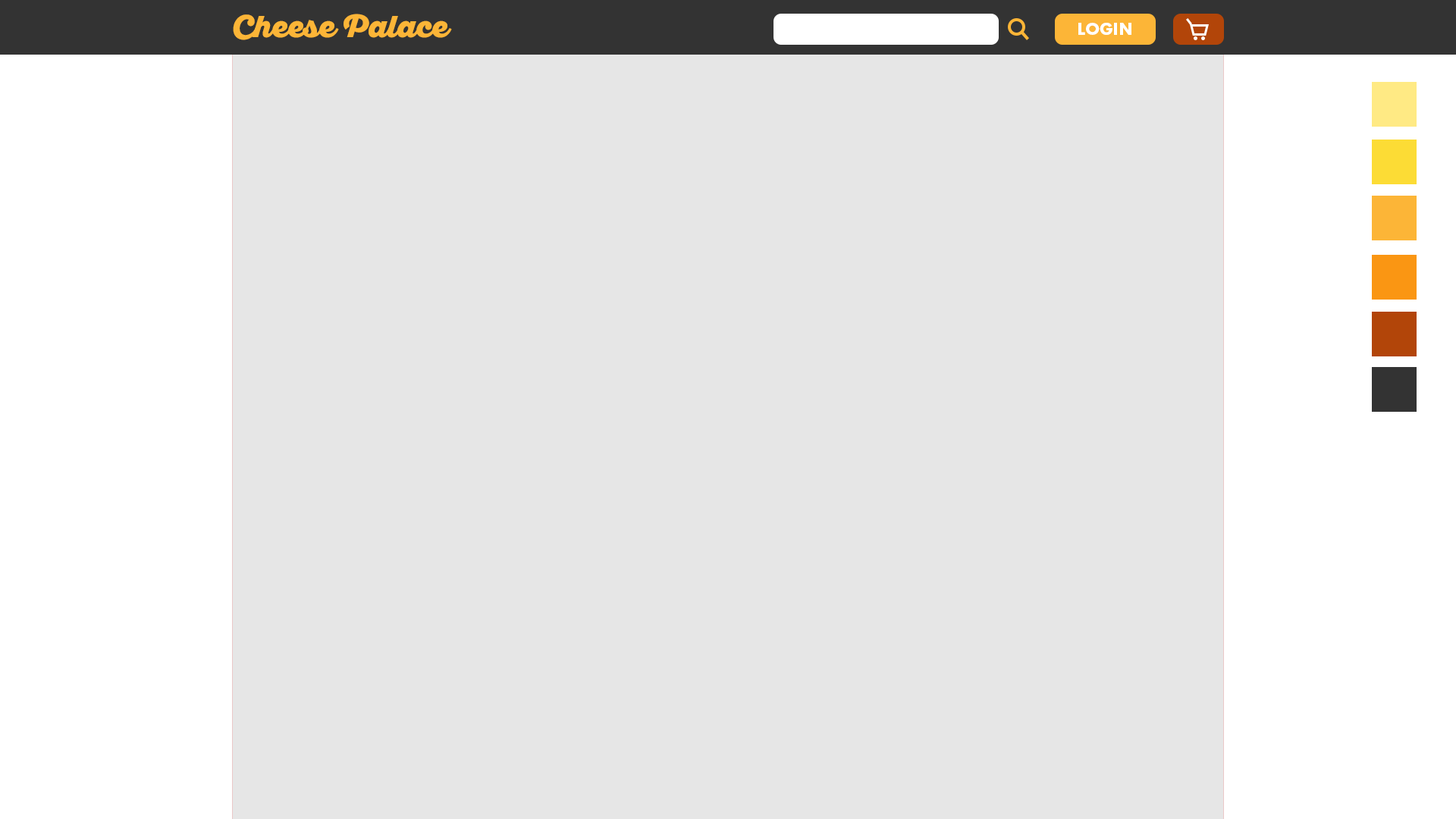
<style>
.page{position:relative;width:1456px;height:819px;background:#e6e6e6}
.page>*{position:absolute;margin:0}
.t1{font:30.3px "SantEliaScript-Black";color:#fcb537}
.t2{font:17.4px "FuturaPT-Bold";color:#ffffff;text-transform:uppercase}
</style>
<div class="page">
<p class="t1" style="left:233px;top:14px;width:219px;height:26px">Cheese Palace</p>
<p class="t2" style="left:1078px;top:23px;width:53px;height:12px">LOGIN</p>
</div>
